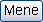
<style>
.page{position:relative;width:43px;height:22px}
.page>*{position:absolute;margin:0}
.t1{font:12.6px "ArialMT";color:#000000;scale:1.1 1}
</style>
<div class="page">
<p class="t1" style="left:5px;top:5px;width:33px;height:10px">Mene</p>
</div>
